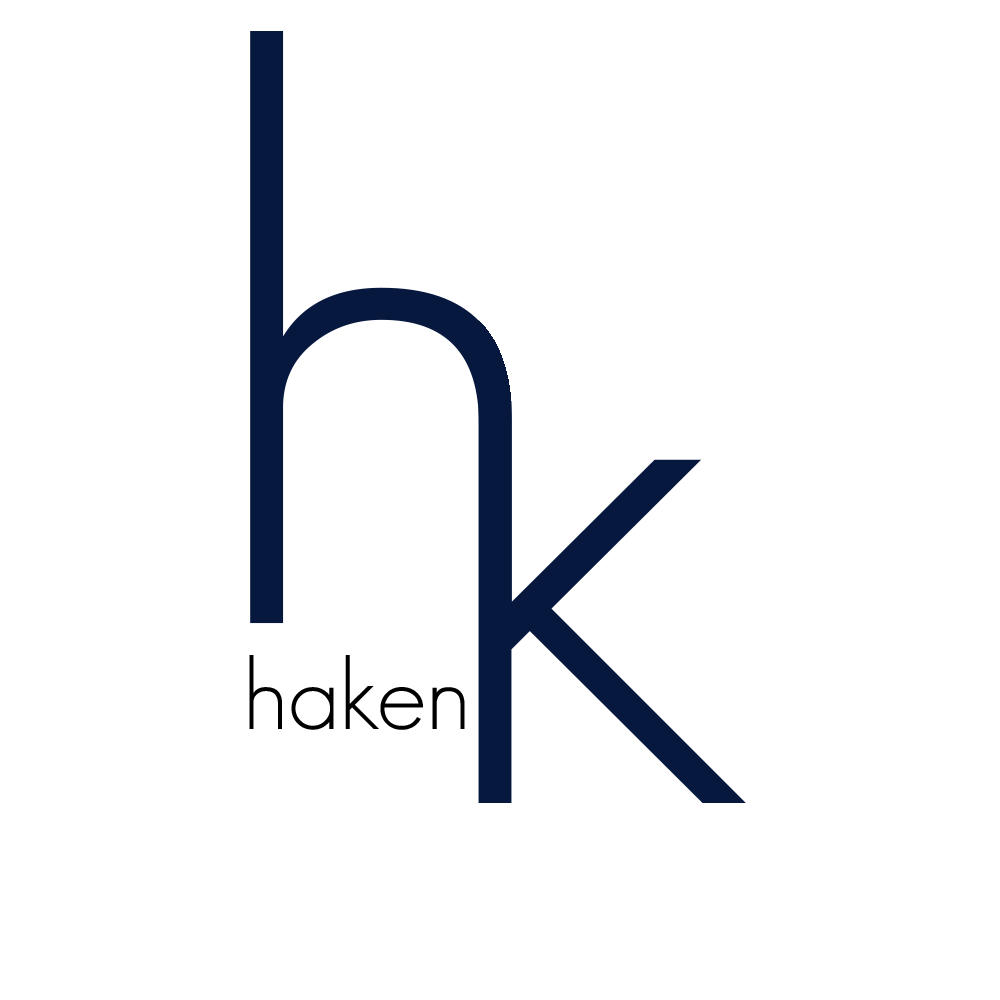
<style>
.page{position:relative;width:1000px;height:1000px;background:#ffffff}
.page>*{position:absolute;margin:0}
.t1{font:100px "GeosansLight";color:#000000}
</style>
<div class="page">
<p class="t1" style="left:249px;top:655px;width:216px;height:75px">haken</p>
</div>
